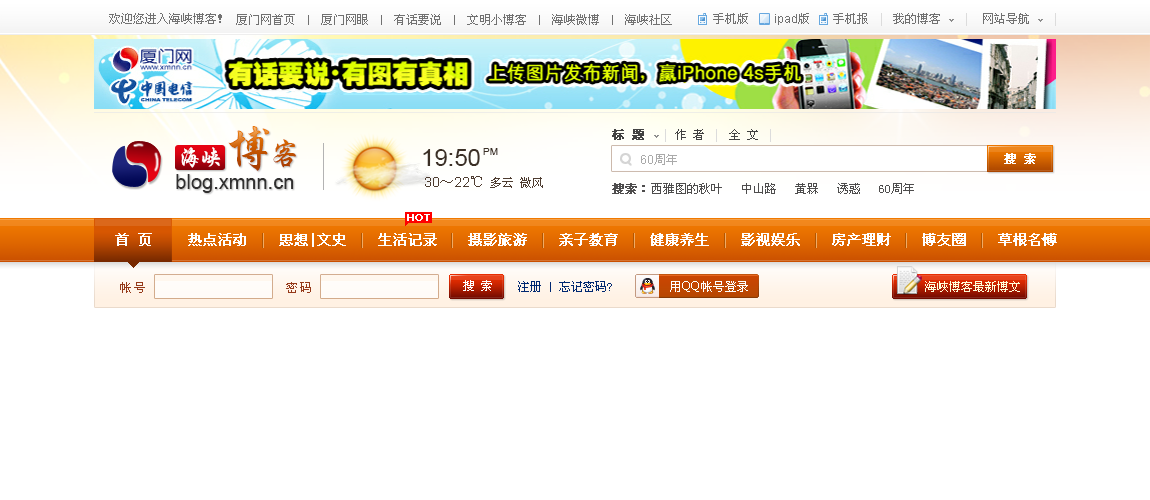
<style>
.page{position:relative;width:1150px;height:500px;background:#ffffff}
.page>*{position:absolute;margin:0}
.t1{font:12px "SimSun";color:#717171}
.t2{font:10px "SimSun";color:#717171}
.t3{font:12px "ArialMT";color:#717171}
.t4{font:48px "STXingkai";letter-spacing:-0.1em}
.t5{font:30px "STXingkai";letter-spacing:-0.1em}
.t6{font:12px "SimSun";color:#424242}
.t7{font:12px "SimSun";color:#424242;font-weight:bold}
.t8{font:24px "STXingkai";letter-spacing:-0.1em;color:#ffffff}
.t9{font:24px "ArialMT";color:#3b2f25}
.t10{font:10px "ArialMT";color:#3b2f25}
.t11{font:12px "ArialMT";color:#aaaaaa}
.t12{font:12px "SimSun";color:#aaaaaa}
.t13{font:12px "SimSun";color:#ffffff;font-weight:bold}
.t14{font:20px "ArialMT";color:#302f2f}
.t15{font:12px "SimSun";color:#4e3c30}
.t16{font:14px "ArialMT";color:#4e3c30}
.t17{font:14px "SimSun";color:#4e3c30}
.t18{font:12px "SimSun";color:#4e4d4d}
.t19{font:12px "SimSun";color:#4e4d4d;font-weight:bold}
.t20{font:14px "SimSun";color:#ffffff;font-weight:bold}
.t21{font:12px "SimSun";color:#ffffff}
.t22{font:12px "SimSun";color:#002871}
.t23{font:10px "SimSun";color:#002871}
.t24{font:12px "SimSun";color:#ffffdb}
.t25{font:12px "SimSun";letter-spacing:0.1em;color:#953919}
</style>
<div class="page">
<p class="t1" style="left:109px;top:13px;width:113px;height:11px">欢迎您进入海峡博客！</p>
<p class="t1" style="left:236px;top:14px;width:436px;height:11px">厦门网首页<span class="t2">  |  </span>厦门网眼<span class="t2">  |  </span>有话要说<span class="t2">  |  </span>文明小博客<span class="t2">  |  </span>海峡微博<span class="t2">  |  </span>海峡社区</p>
<p class="t1" style="left:713px;top:13px;width:35px;height:11px">手机版</p>
<p class="t3" style="left:775px;top:13px;width:34px;height:12px">ipad<span class="t1">版</span></p>
<p class="t1" style="left:833px;top:13px;width:35px;height:11px">手机报</p>
<p class="t1" style="left:893px;top:13px;width:47px;height:11px">我的博客</p>
<p class="t1" style="left:983px;top:13px;width:46px;height:11px">网站导航</p>
<p class="t4" style="left:228px;top:126px;width:68px;height:45px">博<span class="t5">客</span></p>
<p class="t6" style="left:612px;top:129px;width:146px;height:11px"><span class="t7">标 题</span>     作 者    全 文</p>
<p class="t8" style="left:181px;top:147px;width:40px;height:21px">海峡</p>
<p class="t9" style="left:423px;top:149px;width:57px;height:17px">19:50</p>
<p class="t10" style="left:483px;top:148px;width:15px;height:7px">PM</p>
<p class="t11" style="left:641px;top:154px;width:36px;height:11px">60<span class="t12">周年</span></p>
<p class="t13" style="left:1004px;top:153px;width:32px;height:11px">搜 索</p>
<p class="t14" style="left:176px;top:174px;width:118px;height:19px">blog.xmnn.cn</p>
<p class="t15" style="left:425px;top:176px;width:118px;height:12px"><span class="t16">30</span><span class="t17">～</span><span class="t16">22</span><span class="t17">℃  </span>多云 微风</p>
<p class="t18" style="left:612px;top:183px;width:302px;height:11px"><span class="t19">搜索：</span>西雅图的秋叶   中山路   黄槑   诱惑   60周年</p>
<p class="t20" style="left:115px;top:233px;width:942px;height:14px">首 页     热点活动    思想|文史    生活记录    摄影旅游    亲子教育    健康养生    影视娱乐    房产理财    博友圈    草根名博</p>
<p class="t21" style="left:463px;top:280px;width:29px;height:11px">搜 索</p>
<p class="t22" style="left:518px;top:281px;width:94px;height:11px">注册 <span class="t23">|</span> 忘记密码?</p>
<p class="t24" style="left:925px;top:281px;width:95px;height:11px">海峽博客最新博文</p>
<p class="t25" style="left:120px;top:282px;width:25px;height:11px">帐号</p>
<p class="t25" style="left:286px;top:282px;width:25px;height:11px">密码</p>
</div>
